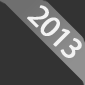
<style>
.page{position:relative;width:85px;height:85px;background:#333333}
.page>*{position:absolute;margin:0}
.t1{font:31px "MyriadPro-Regular";letter-spacing:-0.04em;color:#fefefe;font-weight:bold}
</style>
<div class="page">
<p class="t1" style="left:27px;top:5px;width:55px;height:53px;rotate:45deg">2013</p>
</div>
